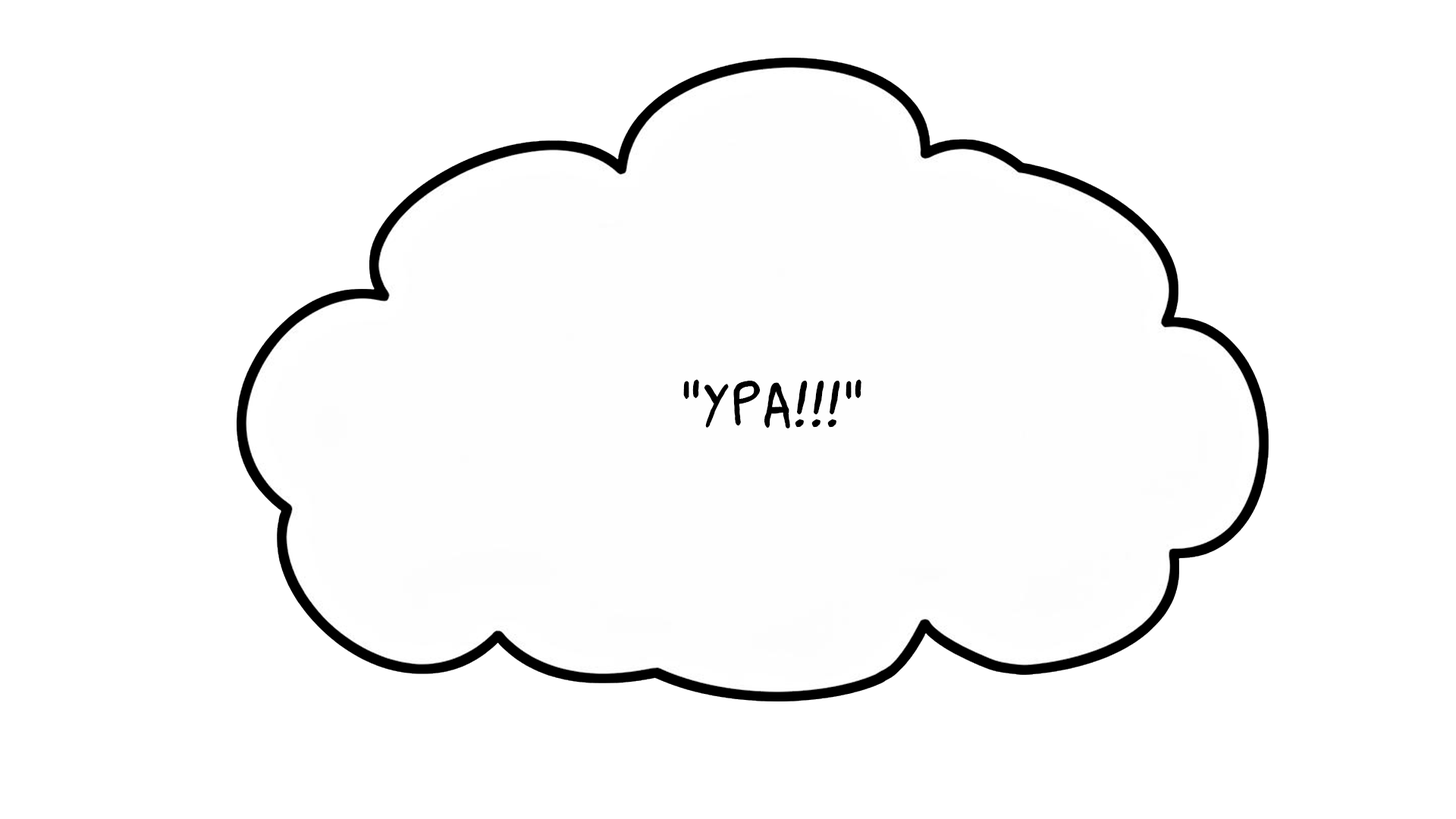
<style>
.page{position:relative;width:1456px;height:819px;background:#ffffff}
.page>*{position:absolute;margin:0}
.t1{font:68.2px "MilkMustacheBB";color:#000000}
</style>
<div class="page">
<p class="t1" style="left:683px;top:379px;width:178px;height:49px">"Ура!!!"</p>
</div>
